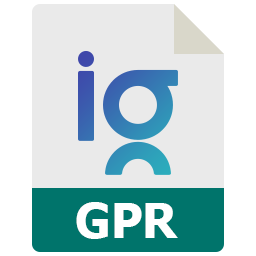
<style>
.page{position:relative;width:256px;height:256px;background:#eaeaea}
.page>*{position:absolute;margin:0}
.t1{font:48px "Tahoma-Bold";color:#ffffff}
</style>
<div class="page">
<p class="t1" style="left:76px;top:202px;width:102px;height:37px">GPR</p>
</div>
